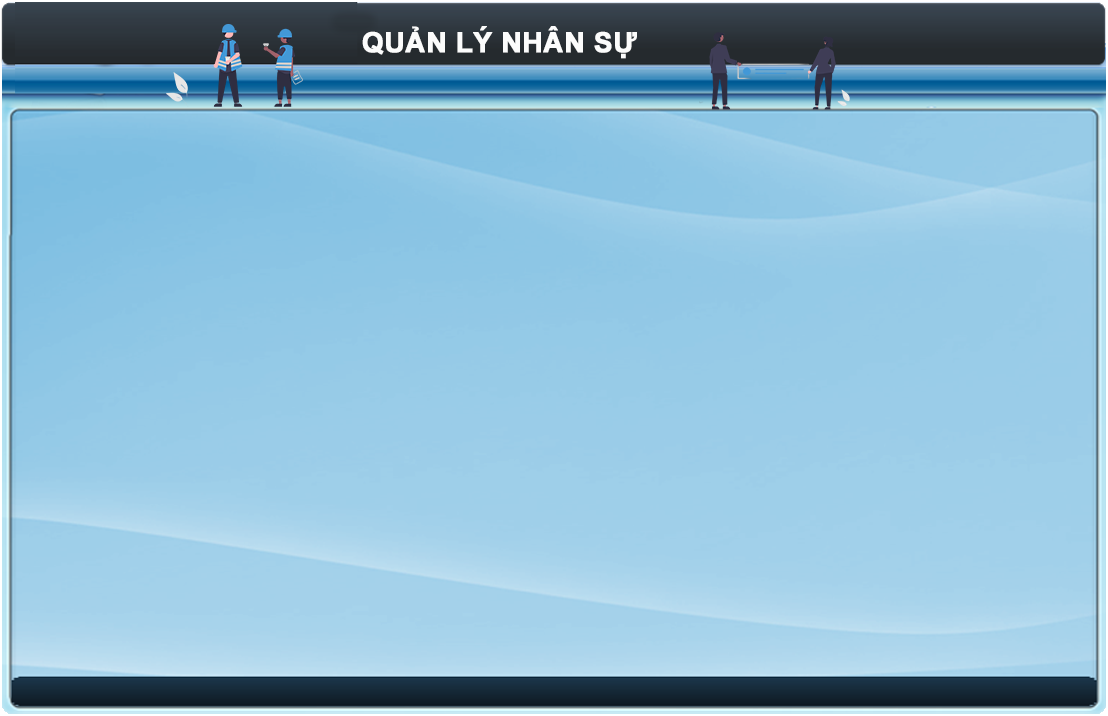
<style>
.page{position:relative;width:1108px;height:716px}
.page>*{position:absolute;margin:0}
.t1{font:28px "Arial-BoldMT";color:#fcfcfc;text-transform:uppercase;font-weight:bold}
</style>
<div class="page">
<p class="t1" style="left:362px;top:26px;width:275px;height:33px">Quản lý nhân sự</p>
</div>
